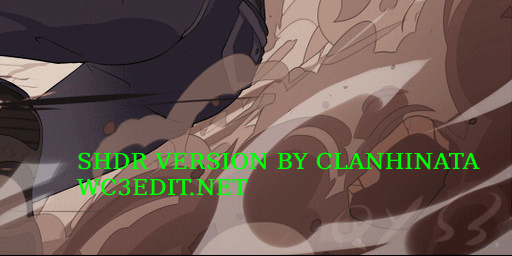
<style>
.page{position:relative;width:512px;height:256px}
.page>*{position:absolute;margin:0}
.t1{font:22px "DejaVuSerif";color:#00ff07;font-weight:bold}
</style>
<div class="page">
<p class="t1" style="left:76px;top:152px;width:404px;height:44px">SHDR VERSION BY CLANHINATA<br>WC3EDIT.NET</p>
</div>
